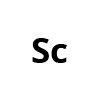
<style>
.page{position:relative;width:100px;height:100px;background:#ffffff}
.page>*{position:absolute;margin:0}
.t1{font:35px "OpenSans-Bold";color:#000000}
</style>
<div class="page">
<p class="t1" style="left:32px;top:38px;width:35px;height:25px">Sc</p>
</div>
